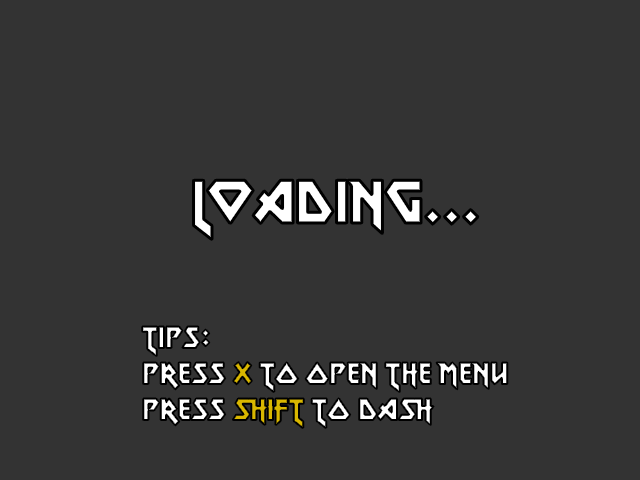
<style>
.page{position:relative;width:640px;height:480px;background:#333333}
.page>*{position:absolute;margin:0}
.t1{font:60px "MetalLord-Regular";color:#ffffff}
.t2{font:30px "MetalLord-Regular"}
</style>
<div class="page">
<p class="t1" style="left:193px;top:180px;width:285px;height:60px">Loading...</p>
<p class="t2" style="left:142px;top:326px;width:366px;height:102px">Tips:<br>Press X to open the menu<br>Press SHift to dash</p>
</div>
